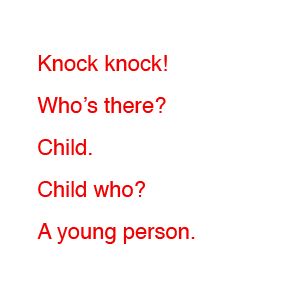
<style>
.page{position:relative;width:300px;height:300px;background:#ffffff}
.page>*{position:absolute;margin:0}
.t1{font:22px/30px "Helvetica";color:#f10000}
</style>
<div class="page">
<p class="t1" style="left:37px;top:55px;width:158px;height:189px">Knock knock!<br>Who’s there?<br>Child.<br>Child who?<br>A young person.</p>
</div>
